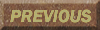
<style>
.page{position:relative;width:100px;height:30px}
.page>*{position:absolute;margin:0}
.t1{font:18px "FranklinGothic-DemiItalic";color:#b2ad72}
</style>
<div class="page">
<p class="t1" style="left:10px;top:9px;width:81px;height:14px">PREVIOUS</p>
<p class="t1" style="left:10px;top:9px;width:81px;height:14px">PREVIOUS</p>
</div>
